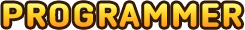
<style>
.page{position:relative;width:245px;height:30px;background:#351a06}
.page>*{position:absolute;margin:0}
.t1{font:30px "Cafe24SsurroundOTF";letter-spacing:0.05em;font-weight:bold}
</style>
<div class="page">
<p class="t1" style="left:3px;top:3px;width:239px;height:24px">PROGRAMMER</p>
</div>
